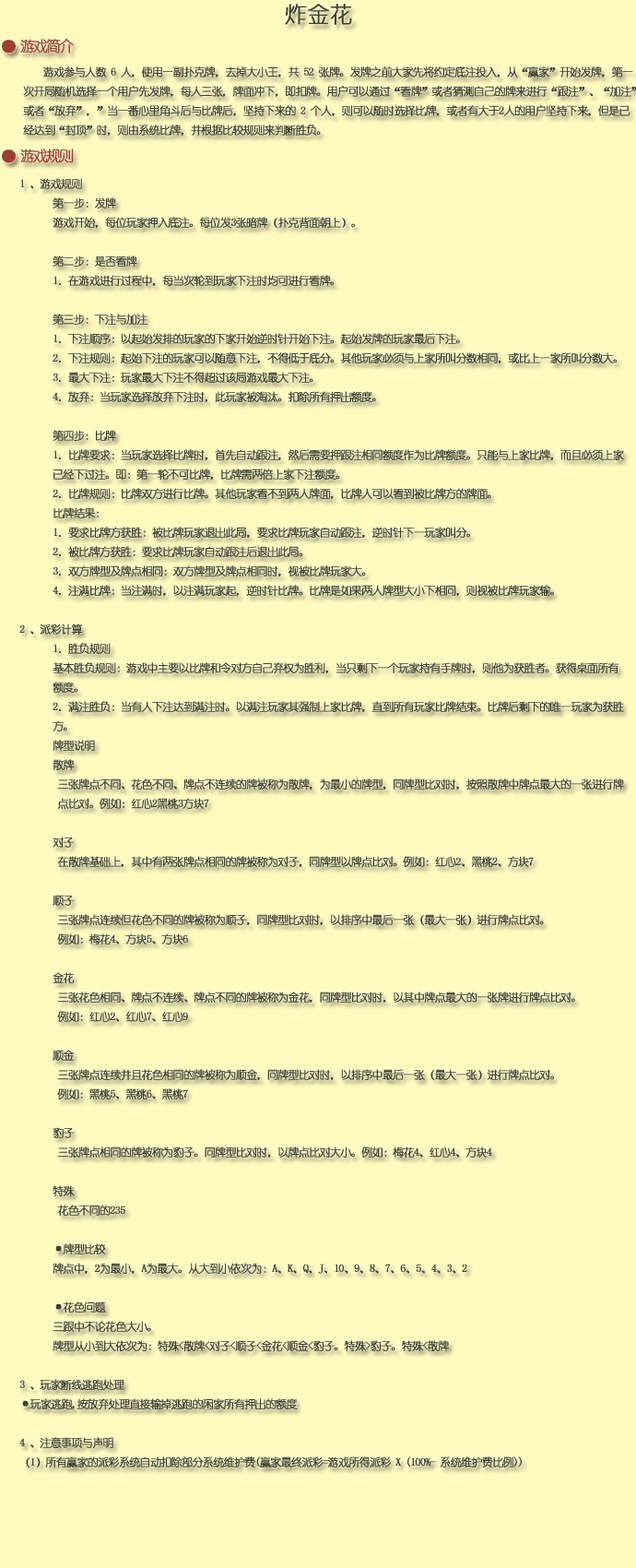
<style>
.page{position:relative;width:636px;height:1568px;background:#fffbbf}
.page>*{position:absolute;margin:0}
.t1{font:22.1px "YouYuan";color:#403f30;font-weight:bold}
.t2{font:14.8px "YouYuan";letter-spacing:-0.14em;color:#9c3f30;font-weight:bold}
.t3{font:11.1px "YouYuan";letter-spacing:-0.08em;color:#403f30;font-weight:bold}
</style>
<div class="page">
<p class="t1" style="left:285px;top:4px;width:67px;height:21px">炸金花</p>
<p class="t2" style="left:2px;top:39px;width:72px;height:14px">● 游戏简介</p>
<p class="t3" style="left:23px;top:66px;width:614px;height:70px">游戏参与人数 6 人，使用一副扑克牌，去掉大小王，共 52 张牌。发牌之前大家先将约定底注投入，从“赢家”开始发牌，第一<br>次开局随机选择一个用户先发牌，每人三张，牌面冲下，即扣牌。用户可以通过“看牌”或者猜测自己的牌来进行“跟注”、“加注”<br>或者“放弃”，”当一番心里角斗后与比牌后，坚持下来的 2 个人，则可以随时选择比牌，或者有大于2人的用户坚持下来，但是已<br>经达到“封顶”时，则由系统比牌，并根据比较规则来判断胜负。</p>
<p class="t2" style="left:2px;top:148px;width:72px;height:15px">● 游戏规则</p>
<p class="t3" style="left:19px;top:178px;width:605px;height:1289px">1 、游戏规则<br> 第一步：发牌<br> 游戏开始，每位玩家押入底注。每位发3张暗牌（扑克背面朝上）。<br> <br> 第二步：是否看牌<br> 1．在游戏进行过程中，每当次轮到玩家下注时均可进行看牌。 <br> <br> 第三步：下注与加注<br> 1．下注顺序：以起始发排的玩家的下家开始逆时针开始下注。起始发牌的玩家最后下注。<br> 2．下注规则：起始下注的玩家可以随意下注，不得低于底分。其他玩家必须与上家所叫分数相同，或比上一家所叫分数大。<br> 3．最大下注：玩家最大下注不得超过该局游戏最大下注。<br> 4．放弃：当玩家选择放弃下注时，此玩家被淘汰。扣除所有押出额度。 <br> <br> 第四步：比牌<br> 1．比牌要求：当玩家选择比牌时，首先自动跟注，然后需要押跟注相同额度作为比牌额度。只能与上家比牌，而且必须上家<br> 已经下过注。即：第一轮不可比牌，比牌需两倍上家下注额度。 <br> 2．比牌规则：比牌双方进行比牌。其他玩家看不到两人牌面，比牌人可以看到被比牌方的牌面。<br> 比牌结果：<br> 1．要求比牌方获胜：被比牌玩家退出此局，要求比牌玩家自动跟注，逆时针下一玩家叫分。<br> 2．被比牌方获胜：要求比牌玩家自动跟注后退出此局。<br> 3．双方牌型及牌点相同：双方牌型及牌点相同时，视被比牌玩家大。<br> 4．注满比牌：当注满时，以注满玩家起，逆时针比牌。比牌是如果两人牌型大小下相同，则视被比牌玩家输。 <br><br>2 、派彩计算<br> 1．胜负规则<br> 基本胜负规则：游戏中主要以比牌和令对方自己弃权为胜利，当只剩下一个玩家持有手牌时，则他为获胜者。获得桌面所有<br> 额度。 <br> 2．满注胜负：当有人下注达到满注时。以满注玩家其强制上家比牌，直到所有玩家比牌结束。比牌后剩下的唯一玩家为获胜<br> 方。<br> 牌型说明  <br> 散牌 <br>  三张牌点不同、花色不同、牌点不连续的牌被称为散牌，为最小的牌型，同牌型比对时，按照散牌中牌点最大的一张进行牌<br>  点比对。例如：红心2黑桃3方块7<br>  <br> 对子 <br>  在散牌基础上，其中有两张牌点相同的牌被称为对子，同牌型以牌点比对。例如：红心2、黑桃2、方块7<br>  <br> 顺子 <br>  三张牌点连续但花色不同的牌被称为顺子，同牌型比对时，以排序中最后一张（最大一张）进行牌点比对。<br>  例如：梅花4、方块5、方块6<br>  <br> 金花 <br>  三张花色相同、牌点不连续、牌点不同的牌被称为金花，同牌型比对时，以其中牌点最大的一张牌进行牌点比对。<br>  例如：红心2、红心7、红心9<br>  <br> 顺金 <br>  三张牌点连续并且花色相同的牌被称为顺金，同牌型比对时，以排序中最后一张（最大一张）进行牌点比对。<br>  例如：黑桃5、黑桃6、黑桃7<br>  <br> 豹子 <br>  三张牌点相同的牌被称为豹子。同牌型比对时，以牌点比对大小。例如：梅花4、红心4、方块4<br>  <br> 特殊 <br>  花色不同的235<br> <br> ·牌型比较<br> 牌点中，2为最小，A为最大。从大到小依次为：A、K、Q、J、10、9、8、7、6、5、4、3、2<br> <br> ·花色问题<br> 三跟中不论花色大小。<br> 牌型从小到大依次为：特殊&lt;散牌&lt;对子&lt;顺子&lt;金花&lt;顺金&lt;豹子。特殊&gt;豹子。特殊&lt;散牌 <br><br>3 、玩家断线逃跑处理<br>·玩家逃跑,按放弃处理直接输掉逃跑的闲家所有押出的额度<br><br>4 、注意事项与声明<br>（1）所有赢家的派彩系统自动扣除部分系统维护费(赢家最终派彩=游戏所得派彩 X (100%- 系统维护费比例))</p>
</div>
